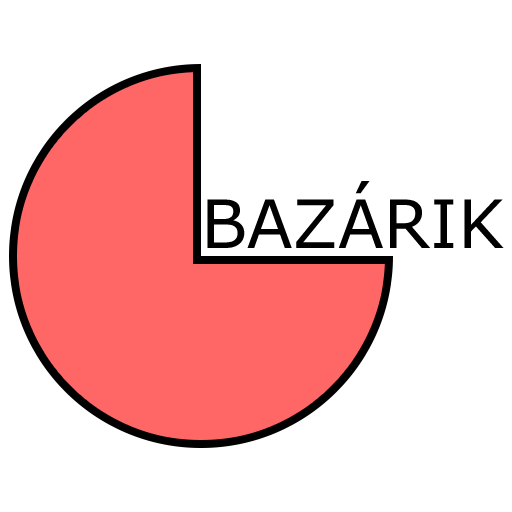
<style>
.page{position:relative;width:512px;height:512px;background:#ffffff}
.page>*{position:absolute;margin:0}
.t1{font:66.7px "Verdana";color:#000000}
</style>
<div class="page">
<p class="t1" style="left:207px;top:181px;width:297px;height:67px">BAZÁRIK</p>
</div>
